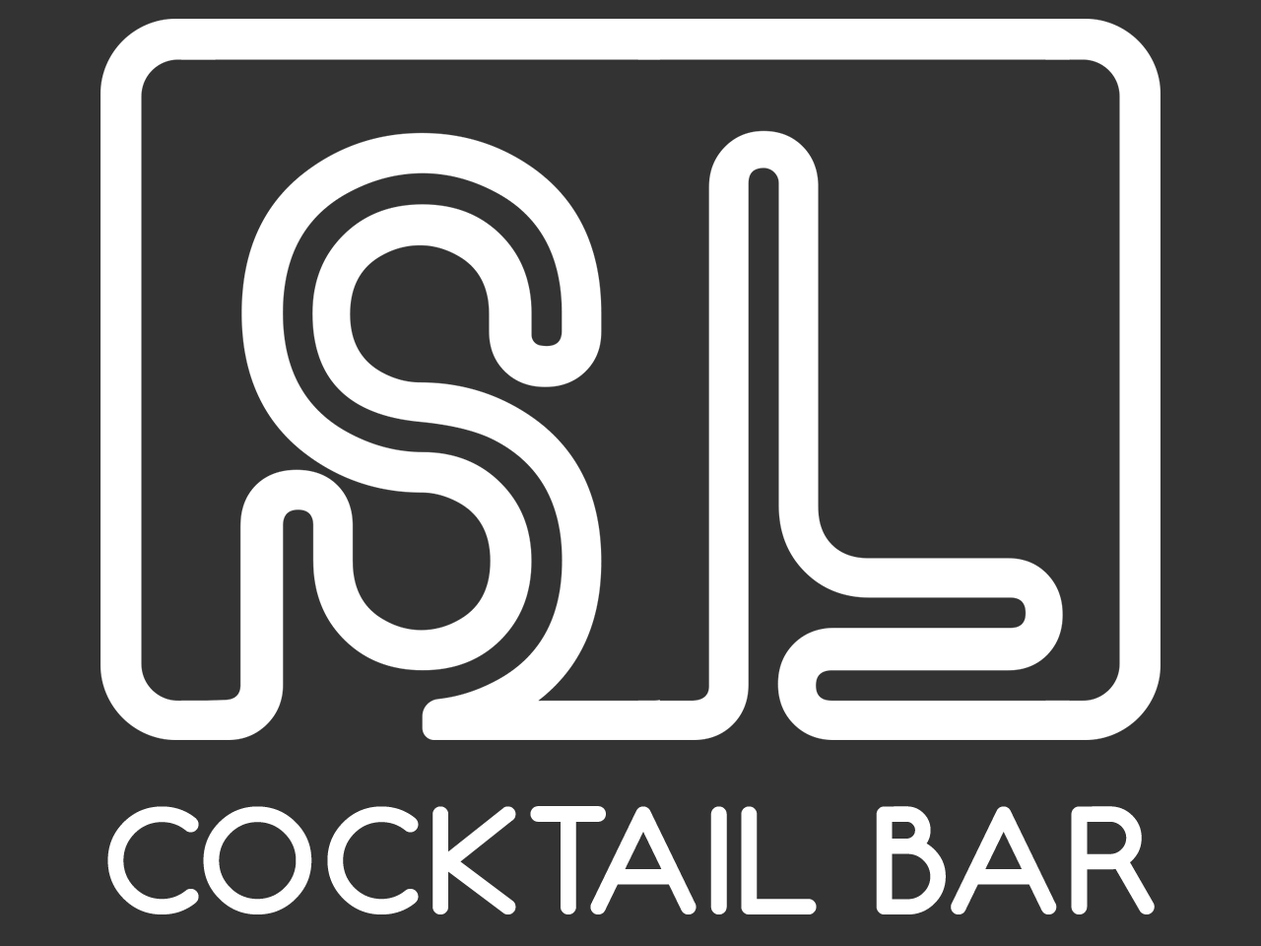
<style>
.page{position:relative;width:1261px;height:946px;background:#333333}
.page>*{position:absolute;margin:0}
.t1{font:154px "Neon80s";color:#ffffff}
</style>
<div class="page">
<p class="t1" style="left:107px;top:806px;width:1048px;height:108px">COCKTAIL BAR</p>
</div>
